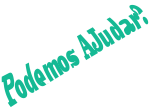
<style>
.page{position:relative;width:152px;height:112px;background:#ffffff}
.page>*{position:absolute;margin:0}
.t1{font:41.8px "ClarendonBT-Black";color:#15b994;scale:0.38 1}
</style>
<div class="page">
<p class="t1" style="left:1px;top:4px;width:148px;height:104px;rotate:-30deg">Podemos AJudar?</p>
</div>
